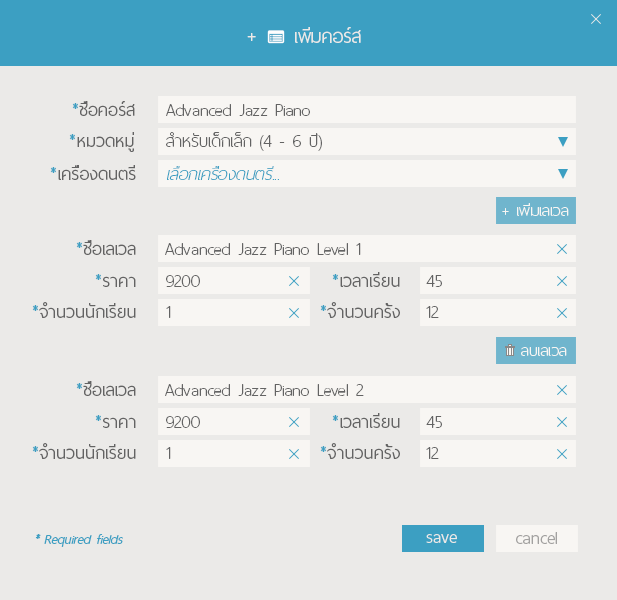
<style>
.page{position:relative;width:617px;height:600px;background:#ebeae8}
.page>*{position:absolute;margin:0}
.t1{font:26px "ThaiSansNeue-Light";letter-spacing:-0.005em;color:#ebeae8}
.t2{font:24px "ThaiSansNeue-Light";color:#636363}
.t3{font:24px "ThaiSansNeue-Light";color:#3c9fc2}
.t4{font:24px "ThaiSansNeue-UltraLight";color:#636363}
.t5{font:24px "ThaiSansNeue-UltraLightItalic";color:#3c9fc2}
.t6{font:22px "ThaiSansNeue-UltraLight";color:#f8f6f3}
.t7{font:18px "ThaiSansNeue-LightItalic";color:#3c9fc2}
.t8{font:24px "ThaiSansNeue-Light";letter-spacing:-0.005em;color:#ebeae8}
.t9{font:24px "ThaiSansNeue-Light";color:#a2a1a0}
</style>
<div class="page">
<p class="t1" style="left:295px;top:27px;width:66px;height:16px">เพิ่มคอร์ส</p>
<p class="t1" style="left:247px;top:33px;width:9px;height:8px">+</p>
<p class="t2" style="left:72px;top:101px;width:63px;height:15px"><span class="t3">*</span>ชื่อคอร์ส</p>
<p class="t4" style="left:166px;top:104px;width:144px;height:12px">Advanced Jazz Piano</p>
<p class="t2" style="left:69px;top:132px;width:65px;height:20px"><span class="t3">*</span>หมวดหมู่</p>
<p class="t4" style="left:166px;top:132px;width:156px;height:19px">สำหรับเด็กเล็ก (4 - 6 ปี)</p>
<p class="t2" style="left:50px;top:165px;width:86px;height:15px"><span class="t3">*</span>เครื่องดนตรี</p>
<p class="t5" style="left:167px;top:166px;width:112px;height:14px">เลือกเครื่องดนตรี...</p>
<p class="t6" style="left:502px;top:203px;width:67px;height:13px">+ เพิ่มเลเวล</p>
<p class="t2" style="left:76px;top:240px;width:60px;height:15px"><span class="t3">*</span>ชื่อเลเวล</p>
<p class="t4" style="left:165px;top:243px;width:196px;height:12px">Advanced Jazz Piano Level 1</p>
<p class="t2" style="left:95px;top:274px;width:41px;height:13px"><span class="t3">*</span>ราคา</p>
<p class="t4" style="left:166px;top:275px;width:34px;height:12px">9200</p>
<p class="t2" style="left:332px;top:272px;width:68px;height:15px"><span class="t3">*</span>เวลาเรียน</p>
<p class="t4" style="left:426px;top:275px;width:16px;height:12px">45</p>
<p class="t2" style="left:32px;top:302px;width:104px;height:16px"><span class="t3">*</span>จำนวนนักเรียน</p>
<p class="t2" style="left:320px;top:302px;width:80px;height:16px"><span class="t3">*</span>จำนวนครั้ง</p>
<p class="t4" style="left:166px;top:306px;width:5px;height:12px">1</p>
<p class="t4" style="left:426px;top:306px;width:13px;height:12px">12</p>
<p class="t6" style="left:521px;top:347px;width:46px;height:9px">ลบเลเวล</p>
<p class="t2" style="left:76px;top:381px;width:60px;height:15px"><span class="t3">*</span>ชื่อเลเวล</p>
<p class="t4" style="left:165px;top:384px;width:199px;height:12px">Advanced Jazz Piano Level 2</p>
<p class="t2" style="left:332px;top:413px;width:68px;height:15px"><span class="t3">*</span>เวลาเรียน</p>
<p class="t2" style="left:95px;top:415px;width:41px;height:13px"><span class="t3">*</span>ราคา</p>
<p class="t4" style="left:166px;top:416px;width:34px;height:12px">9200</p>
<p class="t4" style="left:426px;top:416px;width:16px;height:12px">45</p>
<p class="t2" style="left:32px;top:443px;width:104px;height:16px"><span class="t3">*</span>จำนวนนักเรียน</p>
<p class="t4" style="left:166px;top:447px;width:5px;height:12px">1</p>
<p class="t2" style="left:320px;top:443px;width:80px;height:16px"><span class="t3">*</span>จำนวนครั้ง</p>
<p class="t4" style="left:426px;top:447px;width:13px;height:12px">12</p>
<p class="t7" style="left:35px;top:534px;width:88px;height:13px">* Required fields</p>
<p class="t8" style="left:426px;top:534px;width:31px;height:9px">save</p>
<p class="t9" style="left:516px;top:532px;width:41px;height:12px">cancel</p>
</div>
